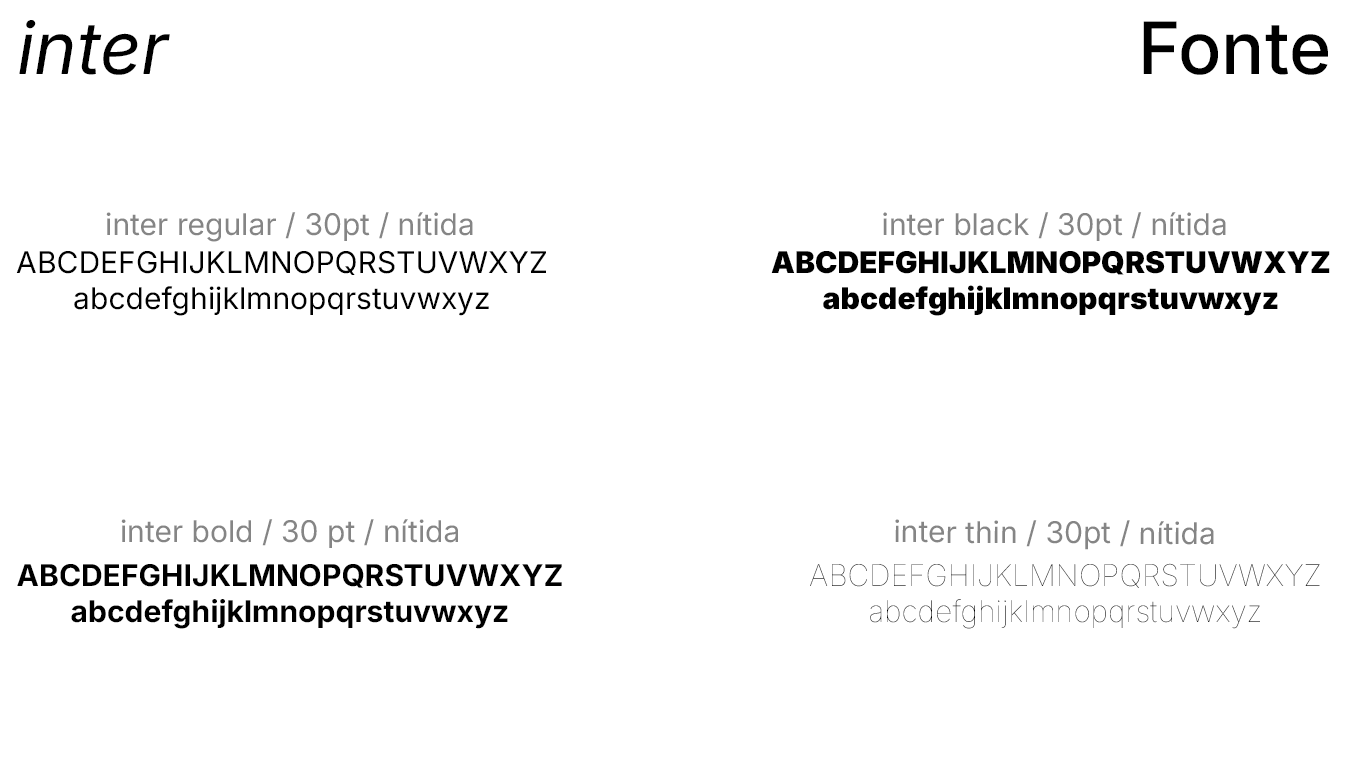
<style>
.page{position:relative;width:1366px;height:768px;background:#ffffff}
.page>*{position:absolute;margin:0}
.t1{font:72px "Inter-Italic";color:#000000}
.t2{font:72px "Inter-Medium";color:#000000}
.t3{font:30px "Inter-Regular";color:#858585}
.t4{font:30px "Inter-Regular";color:#000000}
.t5{font:30px "Inter-Black";color:#000000}
.t6{font:30px "Inter-Bold";color:#000000}
.t7{font:30px "Inter-Thin";color:#000000}
</style>
<div class="page">
<p class="t1" style="left:19px;top:20px;width:151px;height:55px">inter</p>
<p class="t2" style="left:1143px;top:21px;width:185px;height:54px">Fonte</p>
<p class="t3" style="left:106px;top:212px;width:367px;height:30px">inter regular / 30pt / nítida</p>
<p class="t3" style="left:883px;top:212px;width:343px;height:29px">inter black / 30pt / nítida</p>
<p class="t4" style="left:16px;top:251px;width:530px;height:65px;text-align:center">ABCDEFGHIJKLMNOPQRSTUVWXYZ<br>abcdefghijklmnopqrstuvwxyz</p>
<p class="t5" style="left:771px;top:251px;width:559px;height:65px;text-align:center">ABCDEFGHIJKLMNOPQRSTUVWXYZ<br>abcdefghijklmnopqrstuvwxyz</p>
<p class="t3" style="left:121px;top:519px;width:337px;height:29px">inter bold / 30 pt / nítida</p>
<p class="t3" style="left:895px;top:519px;width:319px;height:31px">inter thin / 30pt / nítida</p>
<p class="t6" style="left:17px;top:564px;width:545px;height:65px;text-align:center">ABCDEFGHIJKLMNOPQRSTUVWXYZ<br>abcdefghijklmnopqrstuvwxyz</p>
<p class="t7" style="left:810px;top:563px;width:510px;height:66px;text-align:center">ABCDEFGHIJKLMNOPQRSTUVWXYZ<br>abcdefghijklmnopqrstuvwxyz</p>
</div>
